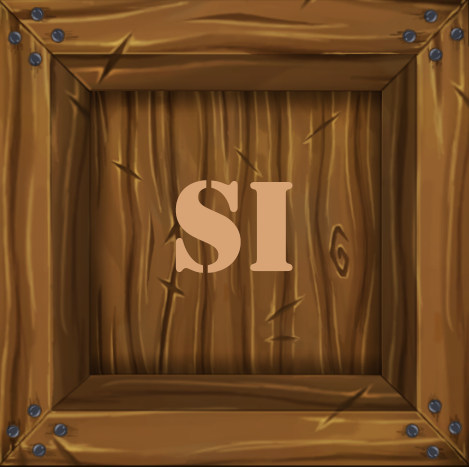
<style>
.page{position:relative;width:469px;height:467px}
.page>*{position:absolute;margin:0}
.t1{font:133.3px "Stencil";color:#d8a475}
</style>
<div class="page">
<p class="t1" style="left:175px;top:180px;width:118px;height:93px">Si</p>
</div>
